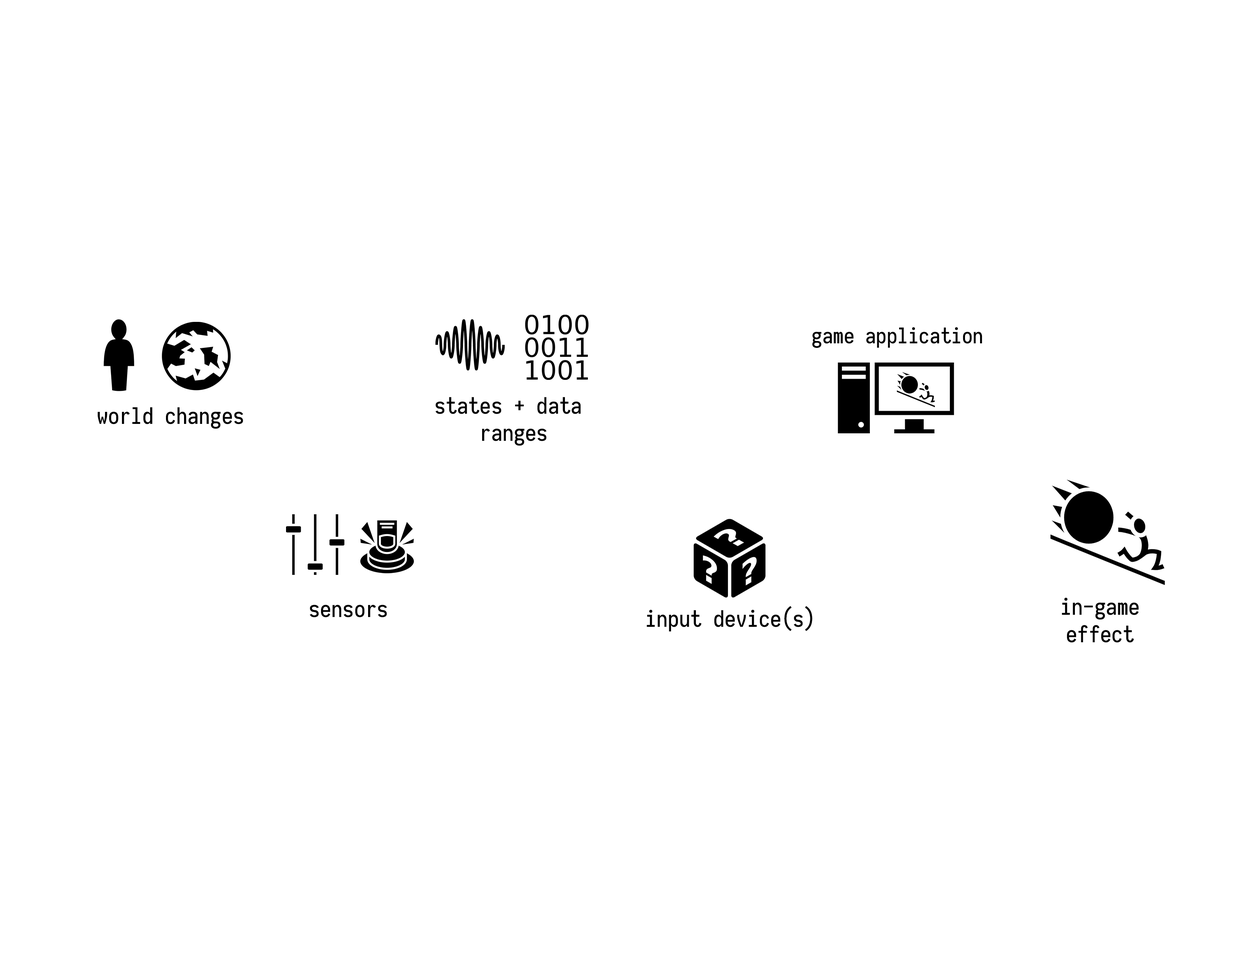
<style>
.page{position:relative;width:1242px;height:960px;background:#ffffff}
.page>*{position:absolute;margin:0}
.t1{font:21.5px "Iosevka-Medium";color:#000000}
.t2{font:22.7px "Iosevka-Medium";color:#000000}
</style>
<div class="page">
<p class="t1" style="left:812px;top:327px;width:170px;height:21px">game application</p>
<p class="t2" style="left:436px;top:397px;width:145px;height:49px;text-align:center">states + data <br>ranges</p>
<p class="t2" style="left:97px;top:407px;width:146px;height:22px">world changes</p>
<p class="t2" style="left:310px;top:605px;width:77px;height:12px">sensors</p>
<p class="t2" style="left:647px;top:606px;width:166px;height:26px">input device(s)</p>
<p class="t2" style="left:1062px;top:597px;width:77px;height:46px;text-align:center">in-game<br>effect</p>
</div>
